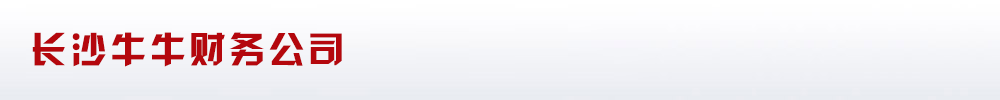
<style>
.page{position:relative;width:1000px;height:100px}
.page>*{position:absolute;margin:0}
.t1{font:36px "JLinXin";letter-spacing:0.1em;color:#b4070d}
</style>
<div class="page">
<p class="t1" style="left:32px;top:32px;width:310px;height:35px">长沙牛牛财务公司</p>
</div>
